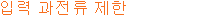
<style>
.page{position:relative;width:200px;height:16px;background:#ffffff}
.page>*{position:absolute;margin:0}
.t1{font:12px "Gulim";color:#f86f1e}
</style>
<div class="page">
<p class="t1" style="left:1px;top:1px;width:125px;height:14px">입력 과전류 제한</p>
</div>
